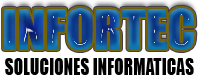
<style>
.page{position:relative;width:200px;height:80px;background:#ffffff}
.page>*{position:absolute;margin:0}
.t1{font:50.5px "Impact"}
.t2{font:22px "Impact";color:#000000;scale:0.79 1}
</style>
<div class="page">
<p class="t1" style="left:4px;top:8px;width:191px;height:42px">INFORTEC</p>
<p class="t2" style="left:5px;top:58px;width:189px;height:17px">SOLUCIONES INFORMATICAS</p>
</div>
